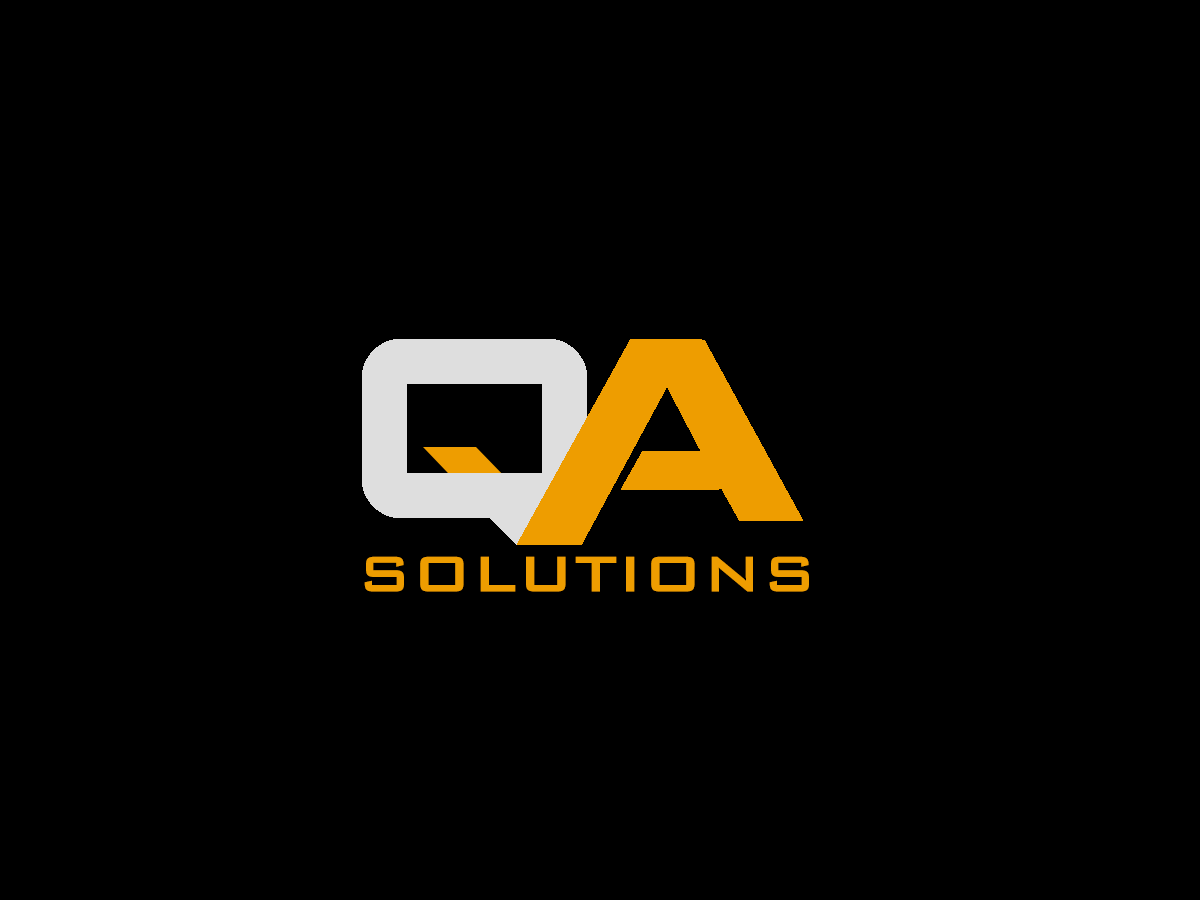
<style>
.page{position:relative;width:1200px;height:900px;background:#000000}
.page>*{position:absolute;margin:0}
.t1{font:67.3px "BankGothicBT-Medium";color:#ee9d00}
</style>
<div class="page">
<p class="t1" style="left:364px;top:556px;width:445px;height:36px">SOLUTIONS</p>
</div>
